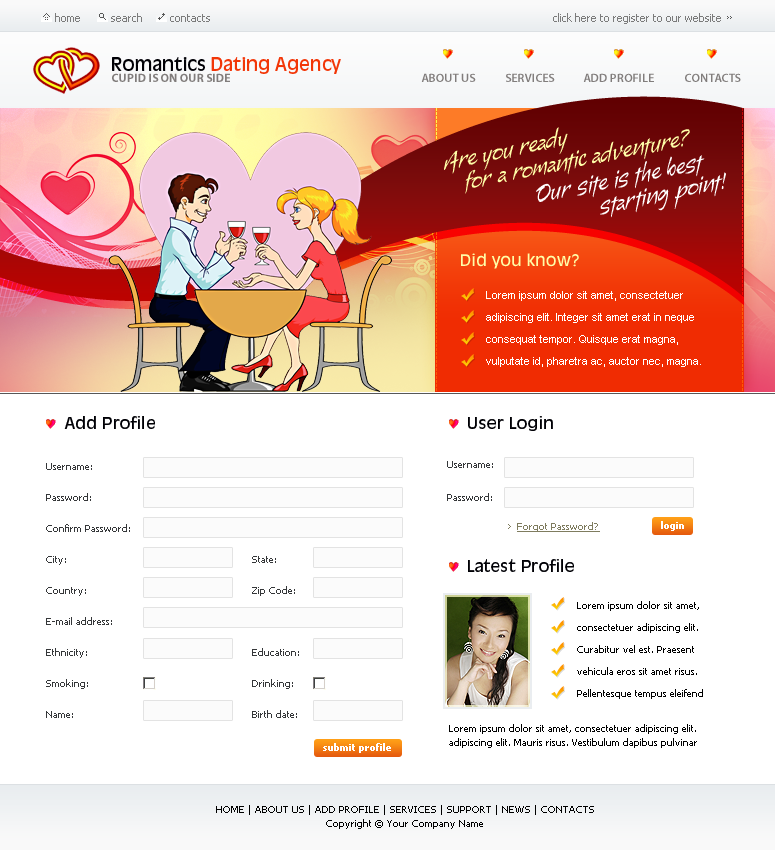
<style>
.page{position:relative;width:775px;height:850px;background:#ffffff}
.page>*{position:absolute;margin:0}
.t1{font:11px "Tahoma";color:#7b7b7b}
.t2{font:18px "AntiqueOliveStd-Roman";color:#f23607}
.t3{font:18px "AntiqueOliveStd-Roman";color:#000005}
.t4{font:12px "MyriadPro-Bold";color:#817d7c}
.t5{font:12px "MyriadPro-Semibold";color:#817d7c}
.t6{font:10px "Tahoma"}
.t7{font:24px "Alma-Alternates";color:#fffea8}
.t8{font:24px "Alma-Alternates";color:#ffffff}
.t9{font:16px "AntiqueOliveStd-Roman";color:#fffea8}
.t10{font:11px/22px "ArialMT";color:#ffffff}
.t11{font:16px "AntiqueOliveStd-Roman";color:#000005}
.t12{font:10px "Tahoma";color:#353739}
.t13{font:10px "Tahoma-Bold";color:#ffffff}
.t14{font:10px "Tahoma";color:#7f7c5f;text-decoration:underline}
.t15{font:10px/22px "Tahoma";color:#000000}
.t16{font:10px/14px "Tahoma";color:#000000}
</style>
<div class="page">
<p class="t1" style="left:55px;top:13px;width:25px;height:9px">home</p>
<p class="t1" style="left:111px;top:13px;width:31px;height:9px">search</p>
<p class="t1" style="left:170px;top:14px;width:40px;height:8px">contacts</p>
<p class="t1" style="left:553px;top:13px;width:168px;height:11px">click here to register to our website</p>
<p class="t2" style="left:112px;top:57px;width:229px;height:17px"><span class="t3">Romantics </span>Dating Agency</p>
<p class="t4" style="left:112px;top:73px;width:118px;height:9px">CUPID IS ON OUR SIDE</p>
<p class="t5" style="left:421px;top:73px;width:55px;height:9px">ABOUT US</p>
<p class="t5" style="left:506px;top:73px;width:49px;height:9px">SERVICES</p>
<p class="t5" style="left:583px;top:73px;width:71px;height:9px">ADD PROFILE</p>
<p class="t5" style="left:685px;top:73px;width:56px;height:9px">CONTACTS</p>
<p class="t6" style="left:742px;top:108px;width:1px;height:299px;rotate:90deg">---------------------------------------------------------------------------</p>
<p class="t7" style="left:444px;top:127px;width:124px;height:47px;rotate:-12deg">Are you ready</p>
<p class="t7" style="left:465px;top:129px;width:225px;height:65px;rotate:-11deg">for a romantic adventure?</p>
<p class="t8" style="left:536px;top:155px;width:169px;height:47px;rotate:-11deg">Our site is the best</p>
<p class="t8" style="left:600px;top:172px;width:126px;height:46px;rotate:-11deg">starting point!</p>
<p class="t9" style="left:461px;top:253px;width:118px;height:16px">Did you know?</p>
<p class="t10" style="left:486px;top:291px;width:215px;height:76px">Lorem ipsum dolor sit amet, consectetuer adipiscing elit. Integer sit amet erat in neque consequat tempor. Quisque erat magna, vulputate id, pharetra ac, auctor nec, magna.</p>
<p class="t11" style="left:64px;top:416px;width:91px;height:13px">Add Profile</p>
<p class="t11" style="left:468px;top:416px;width:85px;height:15px">User Login</p>
<p class="t12" style="left:447px;top:461px;width:46px;height:7px">Username:</p>
<p class="t12" style="left:46px;top:463px;width:46px;height:7px">Username:</p>
<p class="t12" style="left:46px;top:493px;width:45px;height:8px">Password:</p>
<p class="t12" style="left:447px;top:493px;width:45px;height:8px">Password:</p>
<p class="t13" style="left:661px;top:521px;width:23px;height:10px">login</p>
<p class="t12" style="left:46px;top:524px;width:84px;height:8px">Confirm Password:</p>
<p class="t14" style="left:517px;top:522px;width:83px;height:10px">Forgot Password?</p>
<p class="t12" style="left:46px;top:556px;width:20px;height:9px">City:</p>
<p class="t12" style="left:252px;top:556px;width:24px;height:7px">State:</p>
<p class="t11" style="left:468px;top:559px;width:106px;height:13px">Latest Profile</p>
<p class="t12" style="left:46px;top:587px;width:40px;height:9px">Country:</p>
<p class="t12" style="left:252px;top:586px;width:43px;height:10px">Zip Code:</p>
<p class="t15" style="left:577px;top:601px;width:126px;height:98px">Lorem ipsum dolor sit amet, consectetuer adipiscing elit. Curabitur vel est. Praesent vehicula eros sit amet risus. Pellentesque tempus eleifend</p>
<p class="t12" style="left:46px;top:617px;width:66px;height:8px">E-mail address:</p>
<p class="t12" style="left:46px;top:648px;width:41px;height:10px">Ethnicity:</p>
<p class="t12" style="left:252px;top:648px;width:47px;height:8px">Education:</p>
<p class="t12" style="left:46px;top:679px;width:42px;height:10px">Smoking:</p>
<p class="t12" style="left:252px;top:679px;width:41px;height:10px">Drinking:</p>
<p class="t12" style="left:46px;top:711px;width:27px;height:7px">Name:</p>
<p class="t12" style="left:252px;top:710px;width:45px;height:8px">Birth date:</p>
<p class="t16" style="left:449px;top:724px;width:248px;height:24px">Lorem ipsum dolor sit amet, consectetuer adipiscing elit. adipiscing elit. Mauris risus. Vestibulum dapibus pulvinar</p>
<p class="t13" style="left:323px;top:743px;width:68px;height:10px">submit profile</p>
<p class="t16" style="left:216px;top:805px;width:378px;height:24px;text-align:center">HOME | ABOUT US | ADD PROFILE | SERVICES | SUPPORT | NEWS | CONTACTS<br>Copyright © Your Company Name</p>
</div>
